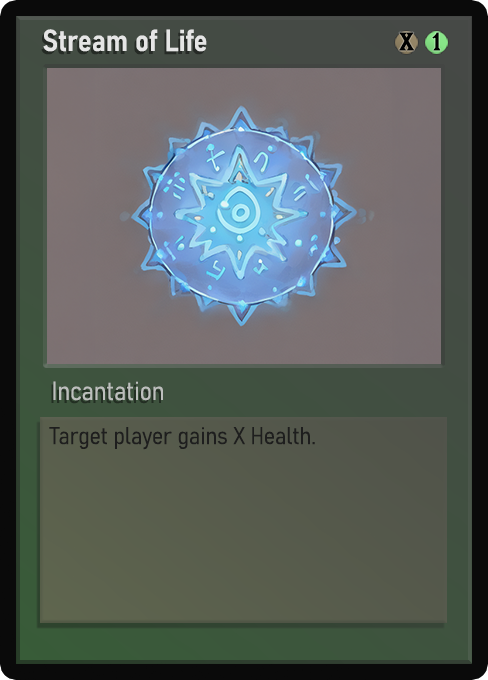
<style>
.page{position:relative;width:488px;height:680px}
.page>*{position:absolute;margin:0}
.t1{font:30px "Bahnschrift-SemiBoldSemiCondensed";color:#f2f2f2;font-weight:bold}
.t2{font:25px "WTRRoycroft";color:#000000;font-weight:bold;scale:1.09 1}
.t3{font:26px "Bahnschrift-LightSemiCondensed";color:#c8c8c8;font-weight:bold}
.t4{font:24px "Bahnschrift-LightSemiCondensed";color:#1e1e1e;font-weight:bold}
</style>
<div class="page">
<p class="t1" style="left:43px;top:29px;width:164px;height:23px;opacity:0.9">Stream of Life</p>
<p class="t2" style="left:399px;top:32px;width:15px;height:19px">X</p>
<p class="t2" style="left:432px;top:32px;width:9px;height:19px">1</p>
<p class="t3" style="left:53px;top:381px;width:110px;height:20px;opacity:0.9">Incantation</p>
<p class="t4" style="left:49px;top:427px;width:266px;height:23px">Target player gains X Health.</p>
</div>
